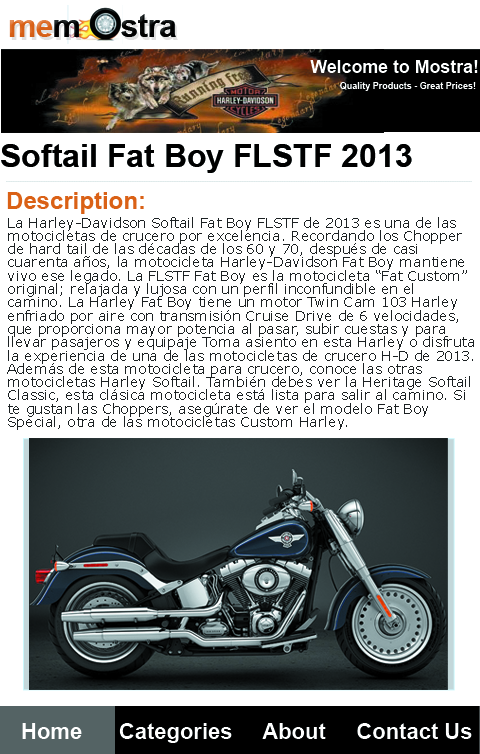
<style>
.page{position:relative;width:480px;height:754px;background:#ffffff}
.page>*{position:absolute;margin:0}
.t1{font:31.6px "Arial-BoldMT";letter-spacing:-0.02em;color:#000000}
.t2{font:31.6px "Arial-BoldMT";letter-spacing:-0.02em;color:#da6117}
.t3{font:17.8px "Arial-BoldMT";color:#ffffff}
.t4{font:9px "Arial-BoldMT";color:#fefefe}
.t5{font:32px "Arial-BoldMT";color:#000000}
.t6{font:24px "Arial-BoldMT";color:#da6116}
.t7{font:14px/13.3px "Verdana";color:#1b2021}
.t8{font:22px "Arial-BoldMT";color:#ffffff}
</style>
<div class="page">
<p class="t1" style="left:9px;top:14px;width:167px;height:23px"><span class="t2"> me</span>m     stra</p>
<p class="t3" style="left:310px;top:60px;width:168px;height:13px">Welcome to Mostra!</p>
<p class="t4" style="left:340px;top:82px;width:136px;height:9px">Quality Products - Great Prices!</p>
<p class="t5" style="left:1px;top:144px;width:411px;height:29px">Softail Fat Boy FLSTF 2013</p>
<p class="t6" style="left:7px;top:192px;width:137px;height:22px">Description:</p>
<p class="t7" style="left:7px;top:217px;width:467px;height:213px">La Harley-Davidson Softail Fat Boy FLSTF de 2013 es una de las motocicletas de crucero por excelencia. Recordando los Chopper de hard tail de las décadas de los 60 y 70, después de casi cuarenta años, la motocicleta Harley-Davidson Fat Boy mantiene vivo ese legado. La FLSTF Fat Boy es la motocicleta “Fat Custom” original; relajada y lujosa con un perfil inconfundible en el camino. La Harley Fat Boy tiene un motor Twin Cam 103 Harley enfriado por aire con transmisión Cruise Drive de 6 velocidades, que proporciona mayor potencia al pasar, subir cuestas y para llevar pasajeros y equipaje Toma asiento en esta Harley o disfruta la experiencia de una de las motocicletas de crucero H-D de 2013. Además de esta motocicleta para crucero, conoce las otras motocicletas Harley Softail. También debes ver la Heritage Softail Classic, esta clásica motocicleta está lista para salir al camino. Si te gustan las Choppers, asegúrate de ver el modelo Fat Boy Special, otra de las motocicletas Custom Harley.</p>
<p class="t8" style="left:22px;top:723px;width:450px;height:20px">Home      Categories     About     Contact Us</p>
</div>
